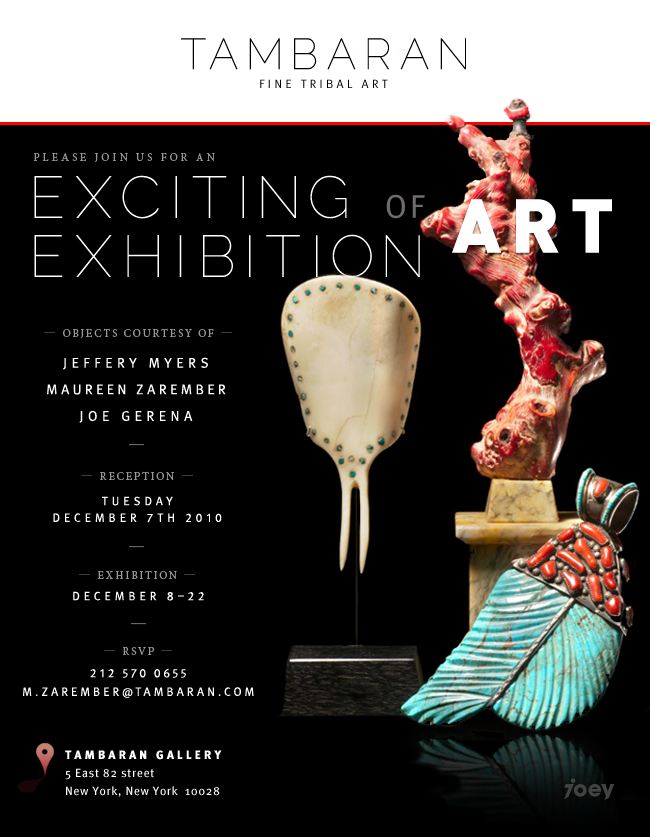
<style>
.page{position:relative;width:650px;height:837px;background:#000000}
.page>*{position:absolute;margin:0}
.t1{font:43.2px "Raleway-Thin";letter-spacing:0.19em;color:#000000}
.t2{font:12px "MetaPro-Normal";letter-spacing:0.27em;color:#000000;text-transform:uppercase}
.t3{font:11px "MinionPro-Regular";letter-spacing:0.27em;color:#999999;text-transform:uppercase}
.t4{font:58.8px/59px "Raleway-Thin";letter-spacing:0.17em;color:#ffffff;text-transform:uppercase}
.t5{font:75px "DIN-Black";letter-spacing:0.15em;color:#ffffff;text-transform:uppercase}
.t6{font:32.5px "MetaPro-Normal";letter-spacing:0.15em;color:#706c6c;text-transform:uppercase}
.t7{font:11px "MinionPro-Regular";letter-spacing:0.17em;color:#999999;text-transform:uppercase}
.t8{font:12.7px "MinionPro-Regular";letter-spacing:0.17em;color:#999999;text-transform:uppercase}
.t9{font:14px/26.6px "MetaPro-Normal";letter-spacing:0.235em;color:#ffffff;text-transform:uppercase}
.t10{font:14px/26.6px "MetaPro-Normal";letter-spacing:0.315em;color:#ffffff;text-transform:uppercase}
.t11{font:18px "MinionPro-Regular";letter-spacing:0.17em;color:#666666;text-transform:uppercase}
.t12{font:12px/16.6px "MetaPro-Normal";letter-spacing:0.315em;color:#ffffff;text-transform:uppercase}
.t13{font:12px "MetaPro-Normal";letter-spacing:0.315em;color:#ffffff;text-transform:uppercase}
.t14{font:11px "MinionPro-Regular";letter-spacing:0.17em;text-transform:uppercase}
.t15{font:12.7px "MinionPro-Regular";letter-spacing:0.17em;text-transform:uppercase}
.t16{font:12px/18.6px "MetaPro-Normal";letter-spacing:0.235em;color:#ffffff;text-transform:uppercase}
.t17{font:12px/18.6px "MetaPro-Normal";letter-spacing:0.275em;color:#ffffff;text-transform:uppercase}
.t18{font:12px/18.6px "MetaPro-Normal";letter-spacing:0.195em;color:#ffffff;text-transform:uppercase}
.t19{font:12px/18px "MetaPro-Book";letter-spacing:0.05em;color:#ffffff}
.t20{font:12px/18px "MetaPro-Black";letter-spacing:0.25em;color:#ffffff}
</style>
<div class="page">
<p class="t1" style="left:181px;top:38px;width:285px;height:32px">TAMBARAN</p>
<p class="t2" style="left:260px;top:79px;width:128px;height:9px">fine tribal art</p>
<p class="t3" style="left:33px;top:153px;width:182px;height:10px">Please join us for AN</p>
<p class="t4" style="left:34px;top:175px;width:386px;height:103px">exciting<br>exhibition</p>
<p class="t5" style="left:386px;top:194px;width:226px;height:59px"><span class="t6">of   </span>art</p>
<p class="t7" style="left:44px;top:328px;width:188px;height:11px"><span class="t8">— </span>objects courtesy of <span class="t8">—</span></p>
<p class="t9" style="left:47px;top:357px;width:179px;height:66px;text-align:center"><span class="t10">Jeffery Myers<br></span>Maureen Zarember <br><span class="t10">Joe Gerena</span></p>
<p class="t11" style="left:129px;top:444px;width:15px;height:2px">—</p>
<p class="t7" style="left:81px;top:471px;width:112px;height:9px"><span class="t8">— </span>Reception <span class="t8">—</span></p>
<p class="t12" style="left:53px;top:496px;width:169px;height:27px;text-align:center">Tuesday<br>December 7th 2010</p>
<p class="t11" style="left:129px;top:546px;width:15px;height:2px">—</p>
<p class="t7" style="left:79px;top:570px;width:116px;height:9px"><span class="t8">— </span>Exhibition <span class="t8">—</span></p>
<p class="t13" style="left:73px;top:591px;width:131px;height:10px">December 8–22</p>
<p class="t11" style="left:131px;top:623px;width:15px;height:2px">—</p>
<p class="t14" style="left:104px;top:647px;width:68px;height:8px"><span class="t15">— </span>RSVP <span class="t15">—</span></p>
<p class="t16" style="left:23px;top:668px;width:231px;height:30px;text-align:center"><span class="t17">212</span><span class="t18"> 570 0655<br></span>m.zarember@tambaran.com</p>
<p class="t19" style="left:65px;top:750px;width:157px;height:47px"><span class="t20">TAMBARAN GALLERY<br></span>5 East 82 street<br>New York, New York  10028</p>
</div>
